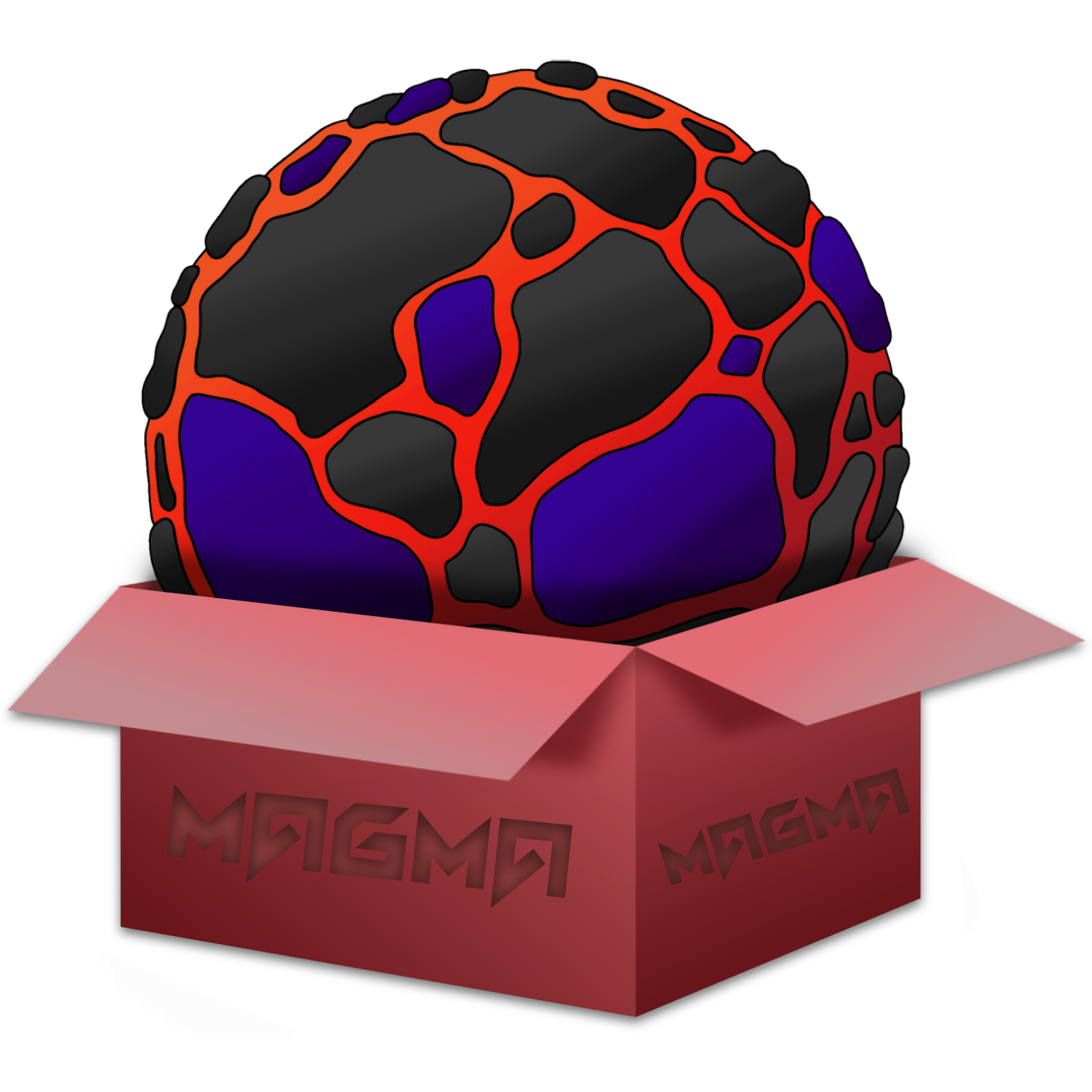
<style>
.page{position:relative;width:1092px;height:1092px;background:#ffffff}
.page>*{position:absolute;margin:0}
.t1{font:90.9px "Vermin-Vibes";color:#5a2626}
.t2{font:145.6px "Vermin-Vibes";color:#6c2d2d}
</style>
<div class="page">
<p class="t1" style="left:657px;top:768px;width:253px;height:118px;rotate:-17deg">MAGMA</p>
<p class="t2" style="left:166px;top:783px;width:407px;height:126px;rotate:6deg">MAGMA</p>
</div>
